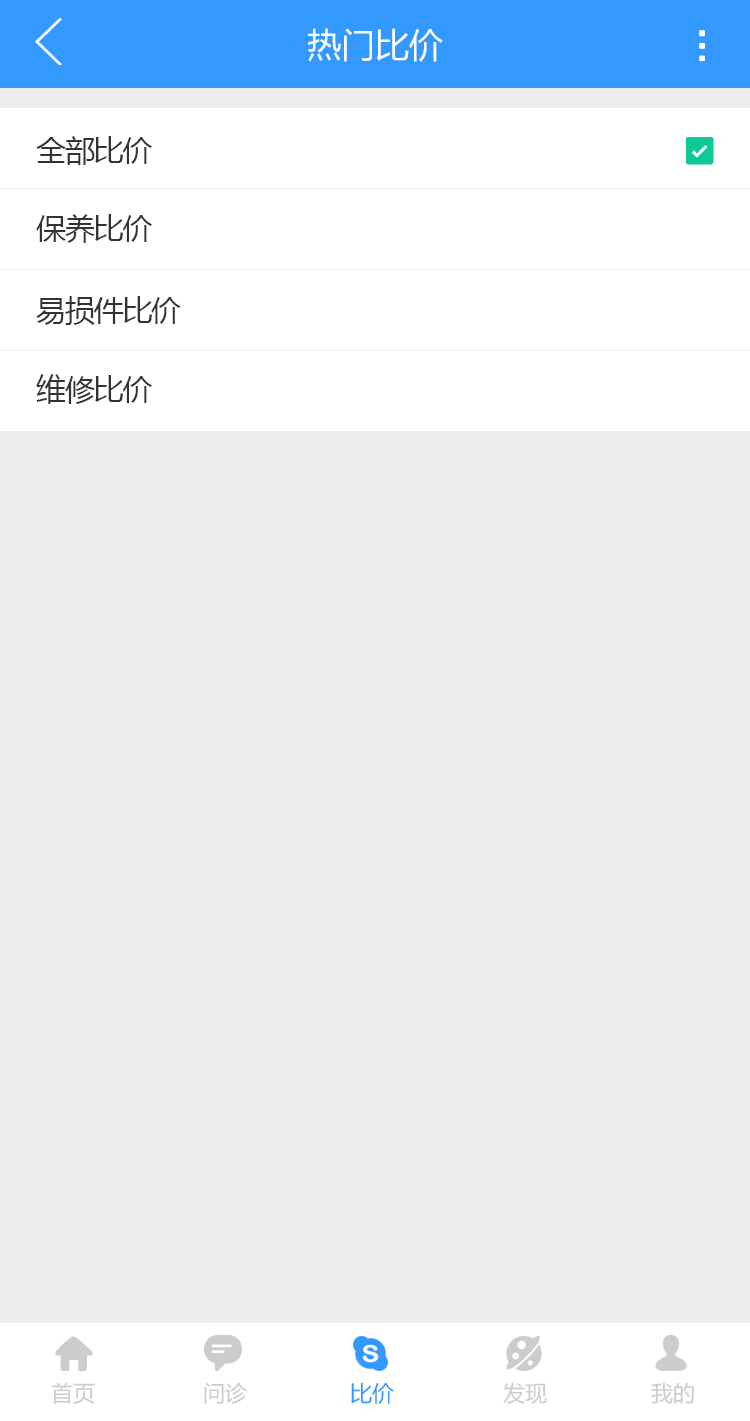
<style>
.page{position:relative;width:750px;height:1421px;background:#ececec}
.page>*{position:absolute;margin:0}
.t1{font:34px "MicrosoftYaHei";color:#ffffff}
.t2{font:30px "MicrosoftYaHei";letter-spacing:-0.04em;color:#333333}
.t3{font:22px "MicrosoftYaHei";color:#cccccc}
.t4{font:22px "MicrosoftYaHei";color:#3399ff}
</style>
<div class="page">
<p class="t1" style="left:308px;top:28px;width:135px;height:34px">热门比价</p>
<p class="t2" style="left:36px;top:136px;width:116px;height:29px">全部比价</p>
<p class="t2" style="left:36px;top:214px;width:116px;height:29px">保养比价</p>
<p class="t2" style="left:36px;top:296px;width:145px;height:29px">易损件比价</p>
<p class="t2" style="left:36px;top:374px;width:116px;height:30px">维修比价</p>
<p class="t3" style="left:51px;top:1382px;width:44px;height:22px">首页</p>
<p class="t3" style="left:204px;top:1382px;width:43px;height:22px">问诊</p>
<p class="t4" style="left:351px;top:1382px;width:43px;height:22px">比价</p>
<p class="t3" style="left:503px;top:1382px;width:44px;height:22px">发现</p>
<p class="t3" style="left:651px;top:1382px;width:43px;height:22px">我的</p>
</div>
